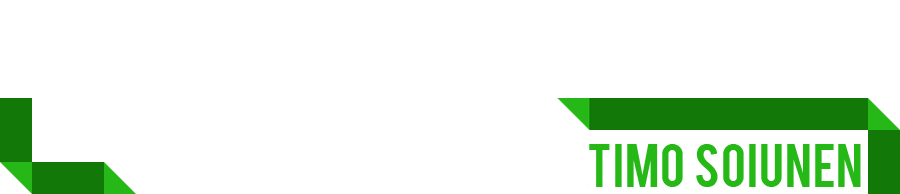
<style>
.page{position:relative;width:900px;height:194px;background:#ffffff}
.page>*{position:absolute;margin:0}
.t1{font:48px "Bebas";color:#25b816}
</style>
<div class="page">
<p class="t1" style="left:589px;top:144px;width:272px;height:43px">Timo  Soiunen</p>
</div>
